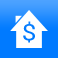
<style>
.page{position:relative;width:58px;height:58px;background:#007aff}
.page>*{position:absolute;margin:0}
.t1{font:22.6px "Roboto-Regular";color:#007aff;scale:1.15 1}
</style>
<div class="page">
<p class="t1" style="left:23px;top:21px;width:12px;height:22px">$</p>
</div>
